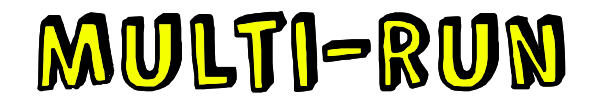
<style>
.page{position:relative;width:600px;height:100px;background:#ffffff}
.page>*{position:absolute;margin:0}
.t1{font:130px "ComicZineOT";color:#000000}
</style>
<div class="page">
<p class="t1" style="left:37px;top:11px;width:529px;height:82px">Multi-run</p>
</div>
